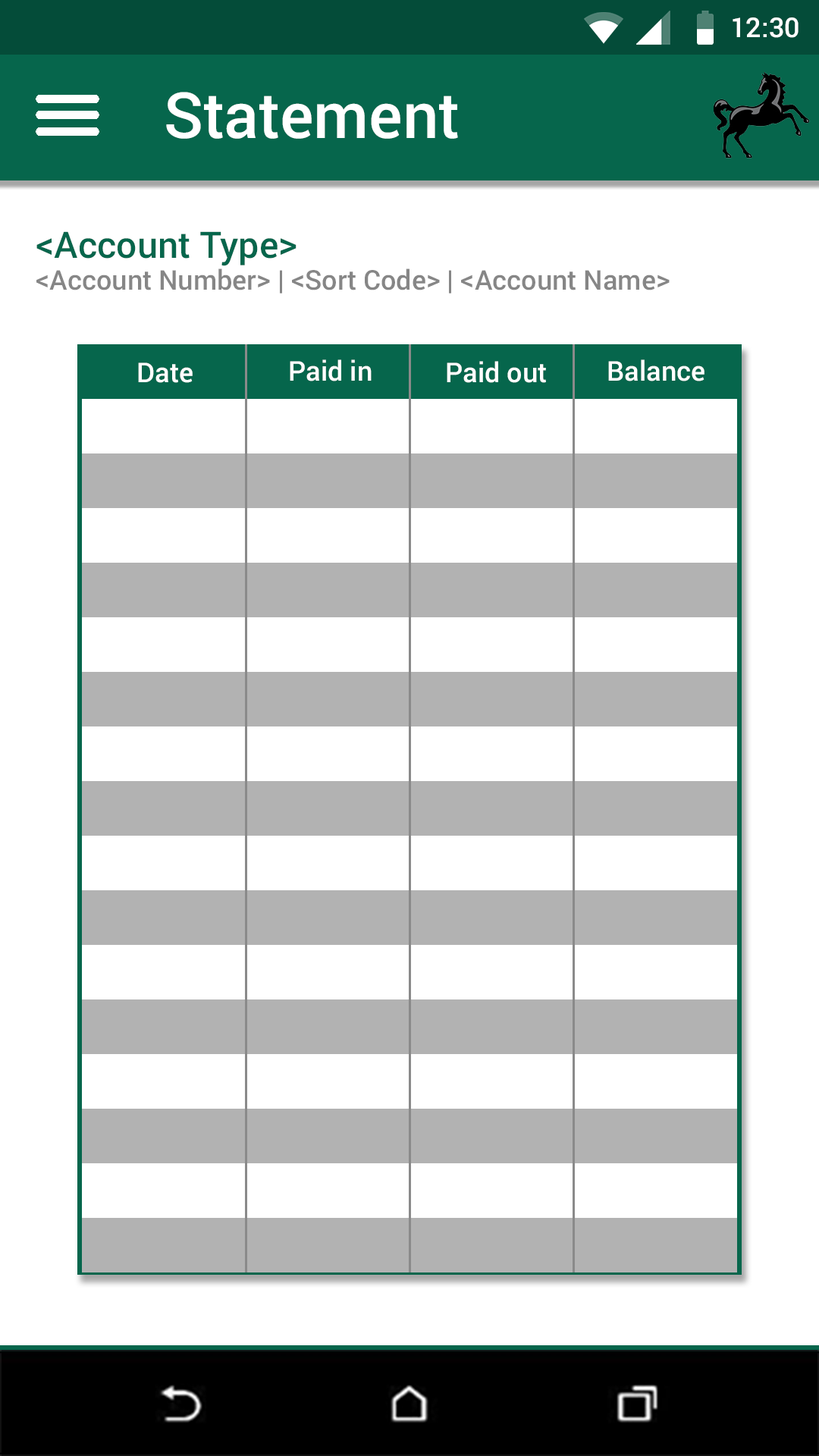
<style>
.page{position:relative;width:819px;height:1456px;background:#ffffff}
.page>*{position:absolute;margin:0}
.t1{font:27.3px "Roboto-Medium";color:#ffffff}
.t2{font:63.7px "Roboto-Medium";color:#ffffff}
.t3{font:36.4px "Roboto-Medium";color:#06664c}
.t4{font:27.3px "Roboto-Medium";color:#868686}
</style>
<div class="page">
<p class="t1" style="left:733px;top:17px;width:66px;height:21px">12:30</p>
<p class="t2" style="left:166px;top:92px;width:292px;height:47px">Statement</p>
<p class="t3" style="left:36px;top:231px;width:261px;height:35px">&lt;Account Type&gt;</p>
<p class="t4" style="left:36px;top:268px;width:634px;height:25px">&lt;Account Number&gt; | &lt;Sort Code&gt; | &lt;Account Name&gt;</p>
<p class="t1" style="left:138px;top:362px;width:55px;height:21px">Date</p>
<p class="t1" style="left:290px;top:359px;width:82px;height:22px">Paid in</p>
<p class="t1" style="left:447px;top:361px;width:99px;height:22px">Paid out</p>
<p class="t1" style="left:608px;top:359px;width:96px;height:22px">Balance</p>
</div>
